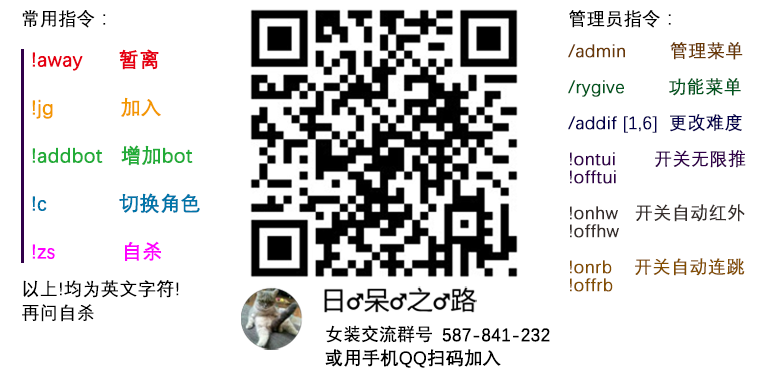
<style>
.page{position:relative;width:770px;height:380px;background:#ffffff}
.page>*{position:absolute;margin:0}
.t1{font:18px/24px "DengXian-Regular";color:#000000;font-weight:bold}
.t2{font:18px/18px "DengXian-Regular";color:#000000;font-weight:bold}
.t3{font:18px "DengXian-Regular";color:#000000;font-weight:bold}
.t4{font:20px/24px "DengXian-Regular";color:#0075a9;font-weight:bold}
.t5{font:20px/24px "DengXian-Regular";color:#ff0000;font-weight:bold}
.t6{font:20px/24px "DengXian-Regular";color:#e60012;font-weight:bold}
.t7{font:20px/24px "DengXian-Regular";color:#f39800;font-weight:bold}
.t8{font:20px/24px "DengXian-Regular";color:#000000;font-weight:bold}
.t9{font:20px/24px "DengXian-Regular";color:#22ac38;font-weight:bold}
.t10{font:20px/24px "DengXian-Regular";color:#ff00ff;font-weight:bold}
.t11{font:18px/18px "DengXian-Regular";color:#31004a;font-weight:bold}
.t12{font:18px/18px "DengXian-Regular";color:#6a3906;font-weight:bold}
.t13{font:18px/18px "DengXian-Regular";color:#00561f;font-weight:bold}
.t14{font:18px/18px "DengXian-Regular";color:#03004c;font-weight:bold}
.t15{font:18px/18px "DengXian-Regular";color:#362e2b;font-weight:bold}
.t16{font:18px/18px "DengXian-Regular";color:#834e00;font-weight:bold}
.t17{font:18px/24px "SimHei";color:#000000}
</style>
<div class="page">
<p class="t1" style="left:22px;top:10px;width:157px;height:312px"><span class="t2">常用指令：<br><br><br><br><br><br><br><br><br><br><br><br><br><br><br></span>以上!均为英文字符!<br>再问自杀</p>
<p class="t3" style="left:569px;top:10px;width:102px;height:18px">管理员指令：</p>
<p class="t4" style="left:32px;top:49px;width:168px;height:212px"><span class="t5"><br><br></span><span class="t6">!away      暂离<br><br></span><span class="t7">!jg           加入<br></span><span class="t8"><br></span><span class="t9">!addbot   增加bot<br></span><span class="t8"><br></span>!c            切换角色<br><span class="t8"><br></span><span class="t10">!zs           自杀</span></p>
<p class="t11" style="left:568px;top:42px;width:178px;height:250px"><span class="t12">/admin        管理菜单<br><br></span><span class="t13">/rygive        功能菜单<br></span><span class="t2"><br></span><span class="t14">/addif [1,6]  更改难度<br></span><span class="t2"><br></span>!ontui       开关无限推<br>!offtui<br><br><span class="t15">!onhw   开关自动红外<br>!offhw<br><br></span><span class="t16">!onrb    开关自动连跳<br>!offrb</span></p>
<p class="t1" style="left:325px;top:325px;width:225px;height:43px"><span class="t17">女装交流群号 </span>587-841-232<br>或用手机QQ扫码加入</p>
</div>
